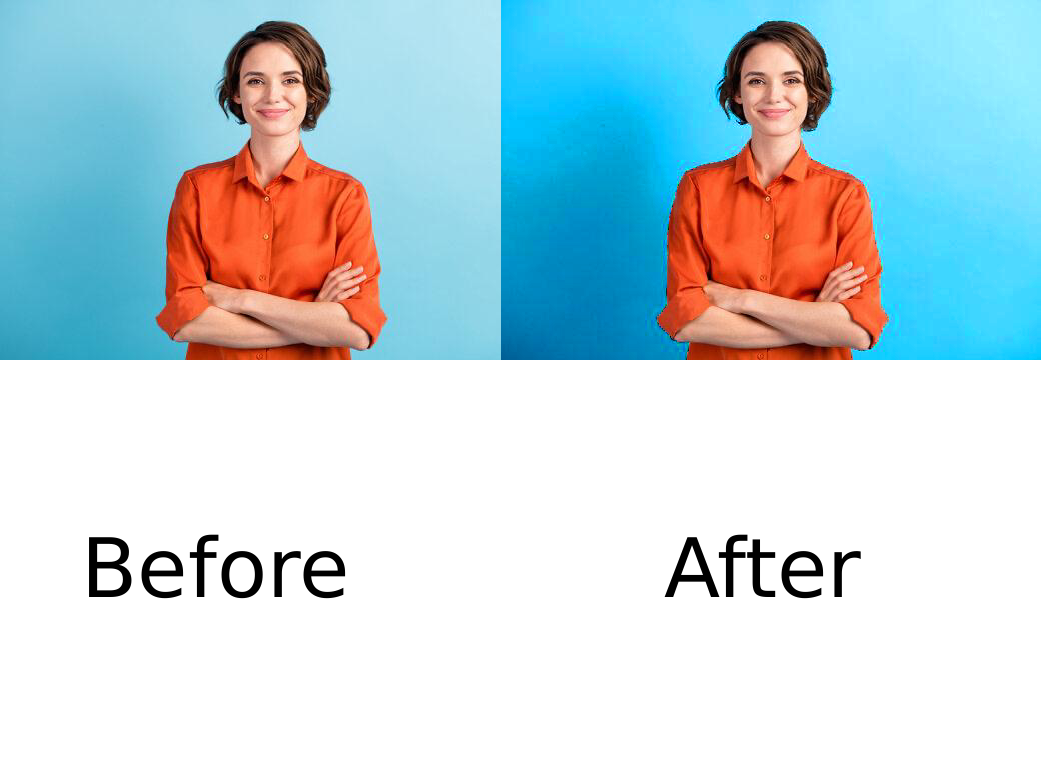
<style>
.page{position:relative;width:1041px;height:781px;background:#ffffff}
.page>*{position:absolute;margin:0}
.t1{font:82px "Arial";color:#000000}
</style>
<div class="page">
<p class="t1" style="left:89px;top:534px;width:257px;height:65px">Before</p>
<p class="t1" style="left:664px;top:534px;width:197px;height:65px">After</p>
</div>
